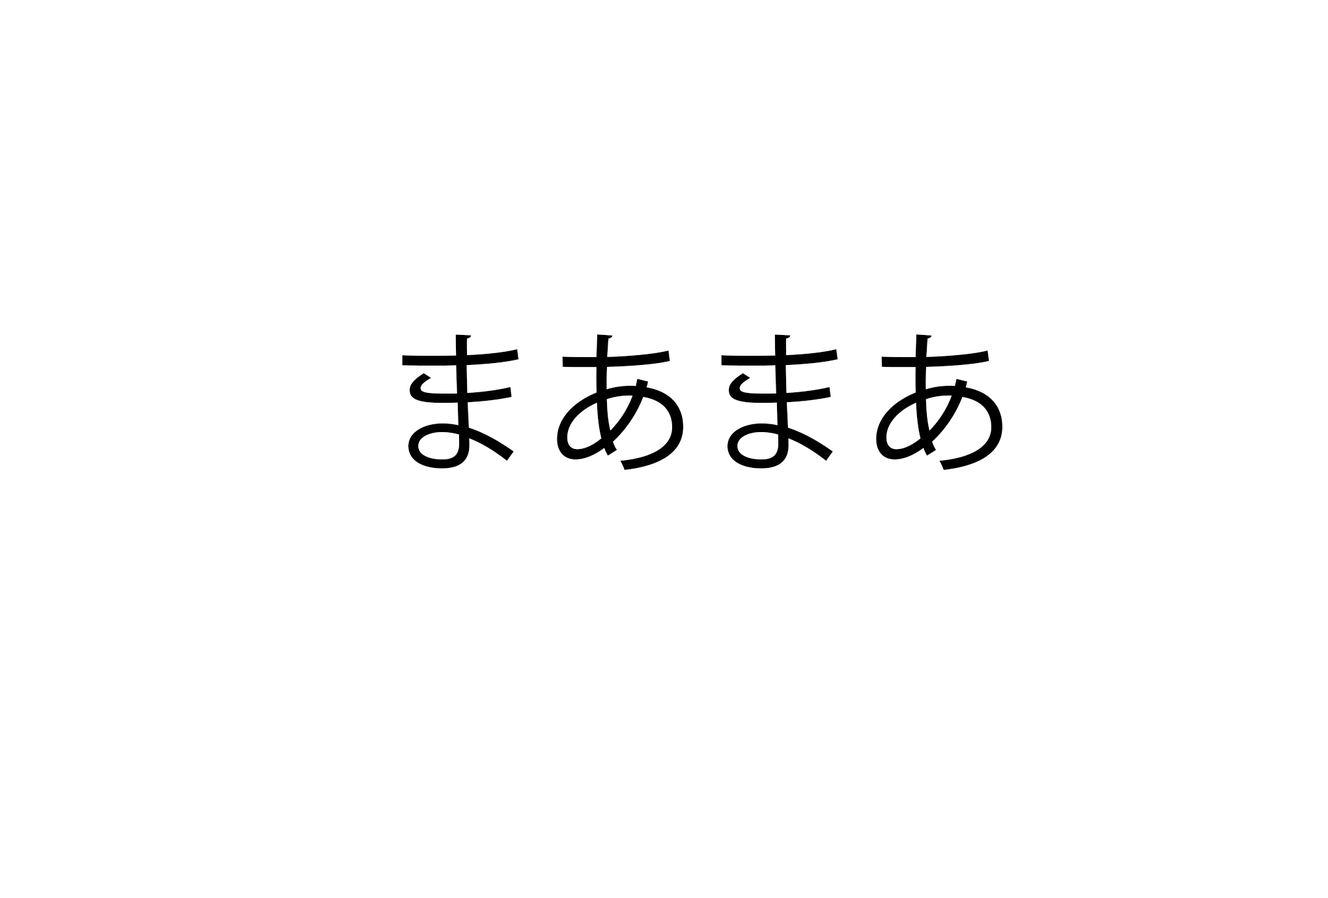
<style>
.page{position:relative;width:1328px;height:898px;background:#ffffff}
.page>*{position:absolute;margin:0}
.t1{font:152px "KozGoPr6N-Regular";letter-spacing:0.05em;color:#000000}
</style>
<div class="page">
<p class="t1" style="left:402px;top:334px;width:601px;height:136px">まあまあ</p>
</div>
